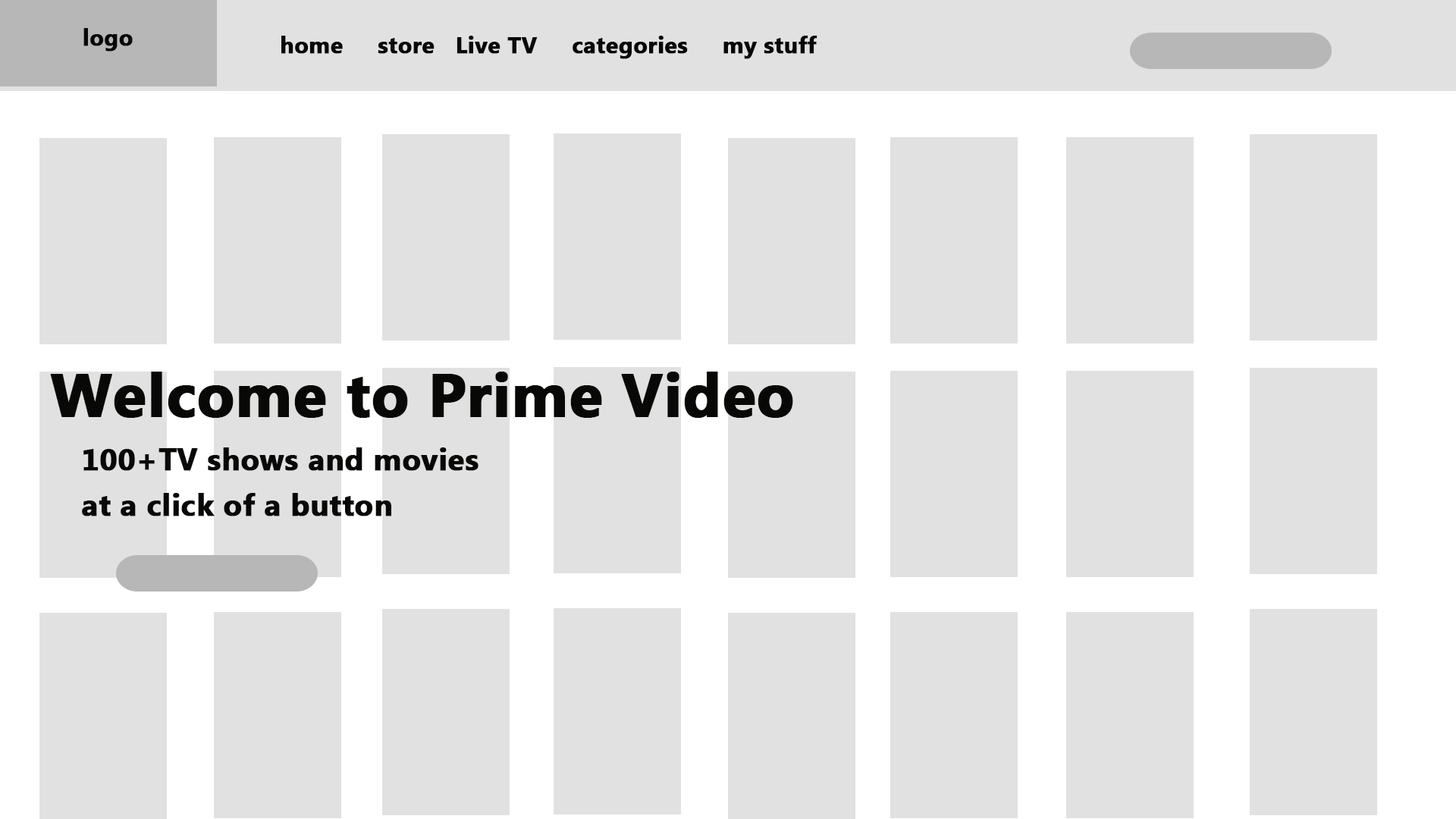
<style>
.page{position:relative;width:1456px;height:819px;background:#e1e1e1}
.page>*{position:absolute;margin:0}
.t1{font:22.7px "MyanmarText-Bold";color:#080807;font-weight:bold}
.t2{font:60.7px "MyanmarText-Bold";color:#080807;font-weight:bold}
.t3{font:30.3px/45.5px "MyanmarText-Bold";color:#080807;font-weight:bold}
</style>
<div class="page">
<p class="t1" style="left:83px;top:28px;width:50px;height:24px">logo</p>
<p class="t1" style="left:281px;top:36px;width:536px;height:23px">home     store   Live TV     categories     my stuff</p>
<p class="t2" style="left:50px;top:372px;width:743px;height:46px">Welcome to Prime Video</p>
<p class="t3" style="left:82px;top:447px;width:397px;height:69px">100+TV shows and movies <br>at a click of a button</p>
</div>
